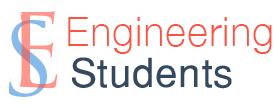
<style>
.page{position:relative;width:276px;height:108px;background:#ffffff}
.page>*{position:absolute;margin:0}
.t1{font:40px "HelveticaNeue-Light";letter-spacing:0.02em;color:#fc5242}
.t2{font:35px "TrajanPro-Regular";letter-spacing:0.02em;color:#fc5242}
.t3{font:40px "Helvetica-Normal";letter-spacing:0.02em;color:#34495e}
.t4{font:40px "Helvetica73-ExtendedBold";letter-spacing:0.02em;color:#34495e}
</style>
<div class="page">
<p class="t1" style="left:68px;top:17px;width:204px;height:37px"><span class="t2">  </span>Engineering</p>
<p class="t3" style="left:71px;top:57px;width:161px;height:32px"><span class="t4"> </span>Students</p>
</div>
